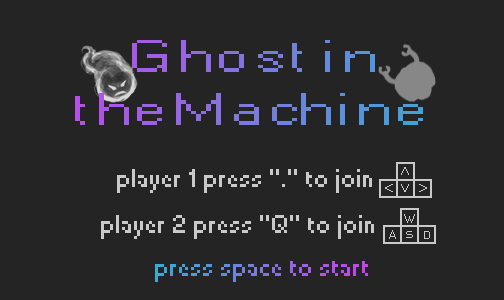
<style>
.page{position:relative;width:504px;height:300px;background:#242424}
.page>*{position:absolute;margin:0}
.t1{font:44.1px "Small Fonts";scale:1.4 1}
.t2{font:24px "Small Fonts";color:#cac9c9}
.t3{font:24px "Small Fonts"}
</style>
<div class="page">
<p class="t1" style="left:75px;top:40px;width:348px;height:85px">G h o s t  i n<br>t h e M  a ch i n e</p>
<p class="t2" style="left:117px;top:169px;width:255px;height:24px">player 1 press “.” to join</p>
<p class="t2" style="left:101px;top:215px;width:273px;height:24px">player 2 press “Q” to join</p>
<p class="t3" style="left:155px;top:261px;width:213px;height:21px">press space to start</p>
</div>
